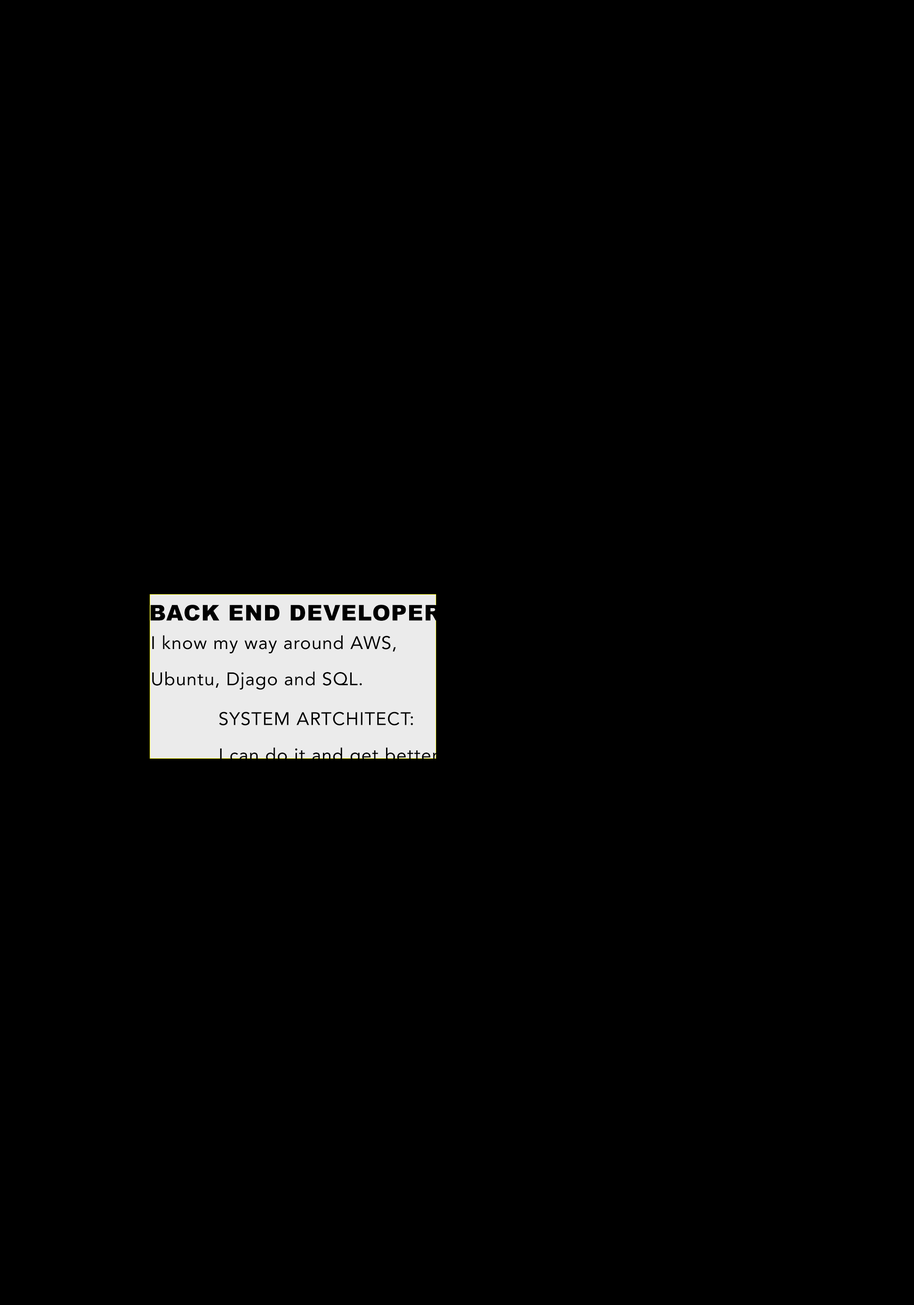
<style>
.page{position:relative;width:914px;height:1305px;background:#000000}
.page>*{position:absolute;margin:0}
.t1{font:21.8px "Arial-Black";letter-spacing:0.034em;color:#000000}
.t2{font:18.1px/36.3px "Avenir-Roman";letter-spacing:0.034em;color:#000000}
</style>
<div class="page">
<p class="t1" style="left:151px;top:605px;width:290px;height:16px">BACK END DEVELOPER</p>
<p class="t2" style="left:152px;top:635px;width:244px;height:55px">I know my way around AWS, Ubuntu, Djago and SQL.</p>
<p class="t2" style="left:219px;top:712px;width:219px;height:54px">SYSTEM ARTCHITECT:<br>I can do it and get better</p>
</div>
